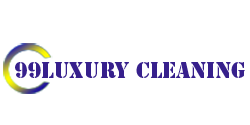
<style>
.page{position:relative;width:250px;height:125px;background:#ffffff}
.page>*{position:absolute;margin:0}
.t1{font:20.8px "StencilStd";color:#37208c}
</style>
<div class="page">
<p class="t1" style="left:15px;top:62px;width:230px;height:16px">99luxury cleaning</p>
</div>
